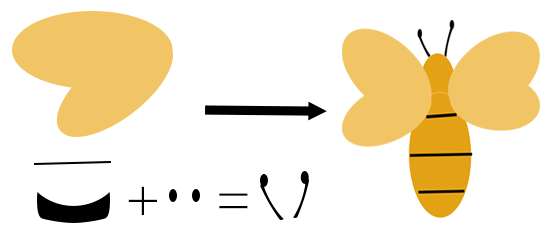
<style>
.page{position:relative;width:550px;height:250px;background:#ffffff}
.page>*{position:absolute;margin:0}
.t1{font:54.2px "Garamond";color:#010101}
</style>
<div class="page">
<p class="t1" style="left:128px;top:186px;width:120px;height:29px">+    =</p>
</div>
